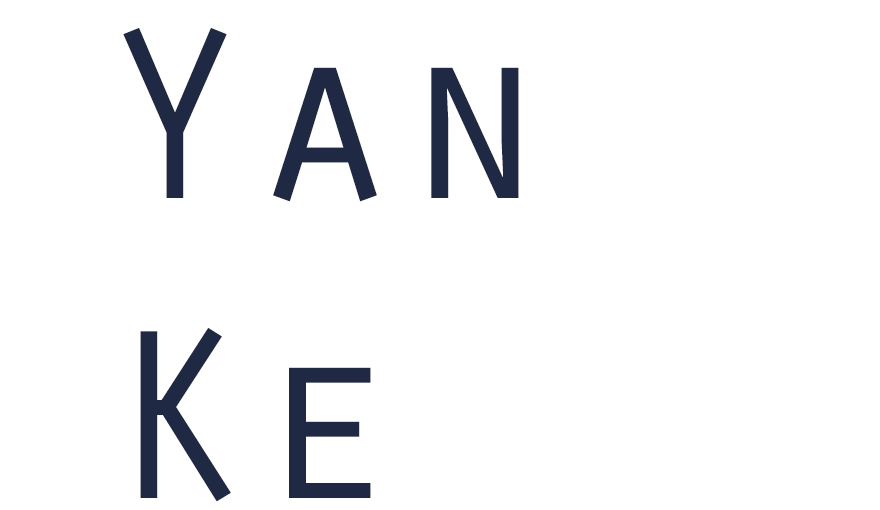
<style>
.page{position:relative;width:880px;height:510px;background:#ffffff}
.page>*{position:absolute;margin:0}
.t1{font:250px "OratorStd";color:#1f2944}
</style>
<div class="page">
<p class="t1" style="left:123px;top:28px;width:396px;height:474px">Yan<br>Ke</p>
</div>
